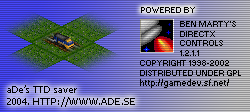
<style>
.page{position:relative;width:250px;height:112px}
.page>*{position:absolute;margin:0}
.t1{font:8px "Small Fonts";color:#000000}
.t2{font:9px "Small Fonts";color:#000000}
.t3{font:10px "Tahoma";color:#000000}
</style>
<div class="page">
<p class="t1" style="left:141px;top:7px;width:54px;height:6px">POWERED BY</p>
<p class="t1" style="left:180px;top:21px;width:56px;height:35px">BEN MARTY’S<br>DIRECTX<br>CONTROLS<br>1.2.1.1</p>
<p class="t1" style="left:140px;top:60px;width:101px;height:28px">COPYRIGHT 1998-2002<br>DISTRIBUTED UNDER GPL<br><span class="t2">http://gamedev.sf.net/</span></p>
<p class="t3" style="left:7px;top:85px;width:128px;height:22px">aDe’s TTD saver<br>2004. HTTP://WWW.ADE.SE</p>
</div>
